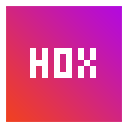
<style>
.page{position:relative;width:128px;height:128px;background:#ffffff}
.page>*{position:absolute;margin:0}
.t1{font:60px "Pixelzim-3x5";letter-spacing:-0.1em;color:#ffffff;text-transform:uppercase}
</style>
<div class="page">
<p class="t1" style="left:30px;top:48px;width:66px;height:30px">hox</p>
</div>
